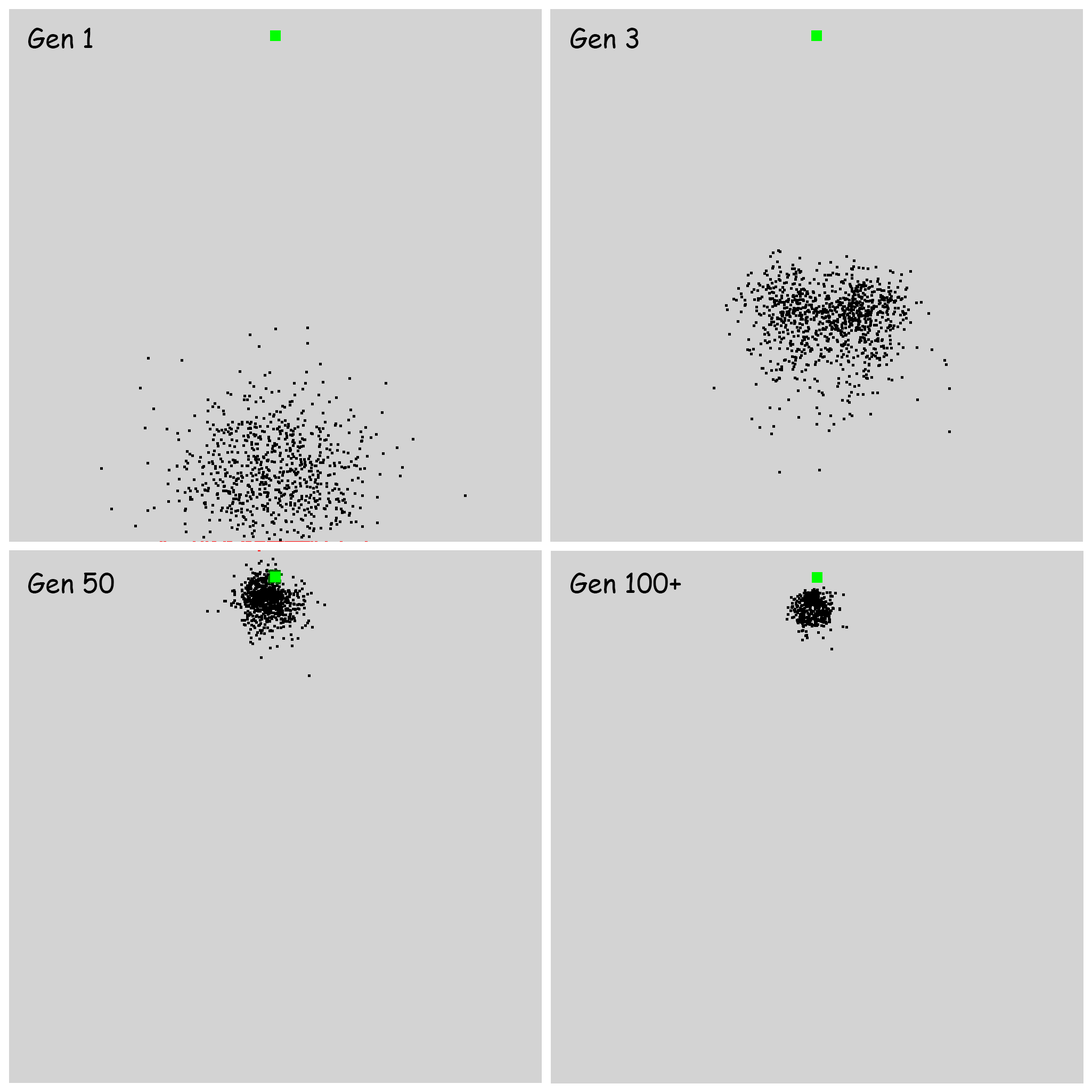
<style>
.page{position:relative;width:1092px;height:1092px;background:#d3d3d3}
.page>*{position:absolute;margin:0}
.t1{font:26.6px "ComicSansMS";letter-spacing:0.002em;color:#000000}
</style>
<div class="page">
<p class="t1" style="left:28px;top:28px;width:65px;height:20px">Gen 1</p>
<p class="t1" style="left:570px;top:28px;width:69px;height:20px">Gen 3</p>
<p class="t1" style="left:28px;top:572px;width:86px;height:21px">Gen 50</p>
<p class="t1" style="left:570px;top:573px;width:111px;height:20px">Gen 100+</p>
</div>
